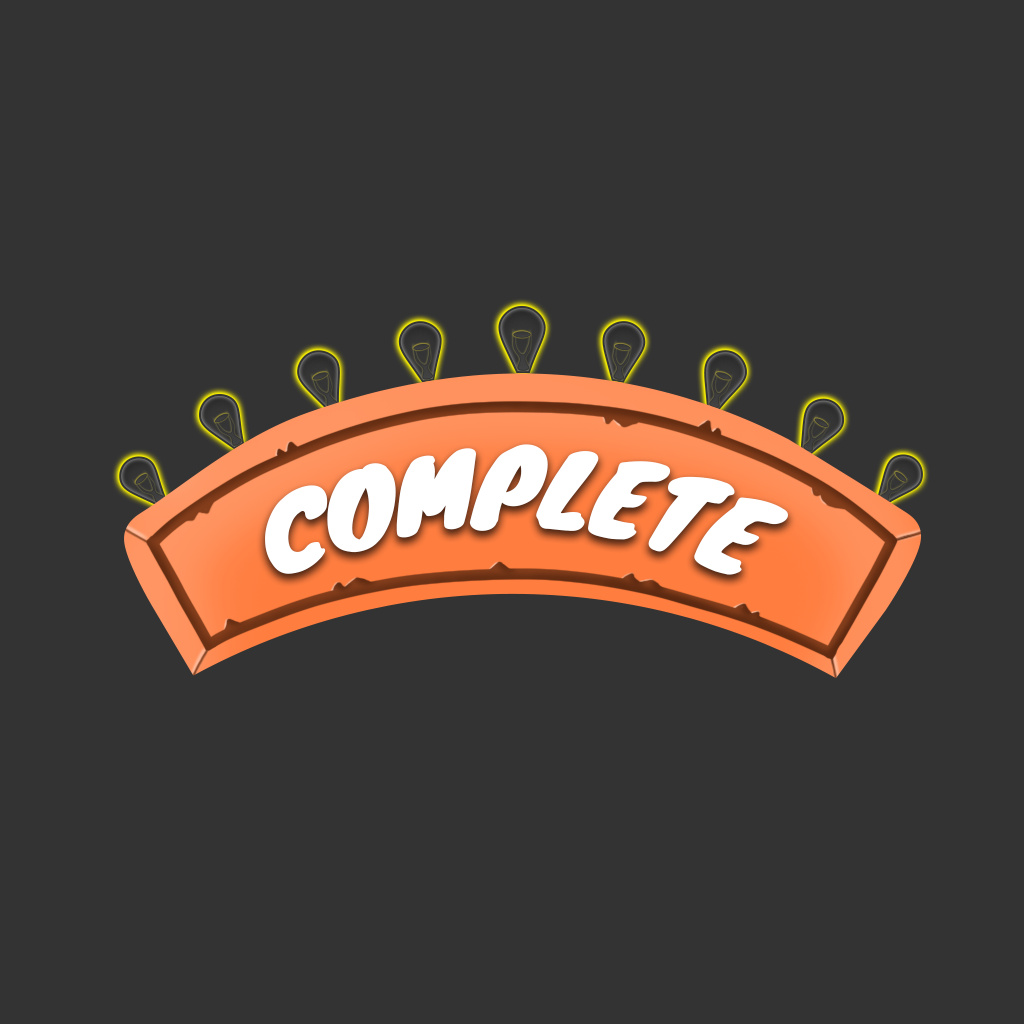
<style>
.page{position:relative;width:1024px;height:1024px;background:#333333}
.page>*{position:absolute;margin:0}
.t1{font:96.6px "Knewave-Regular";color:#ffffff}
</style>
<div class="page">
<p class="t1" style="left:265px;top:444px;width:523px;height:131px">COMPLETE</p>
</div>
